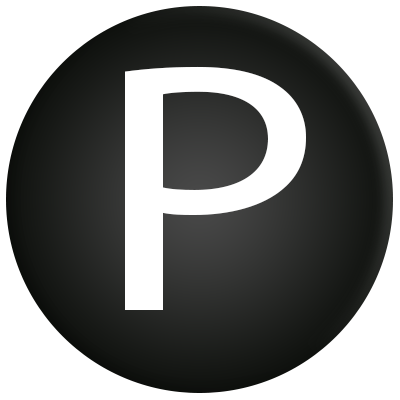
<style>
.page{position:relative;width:400px;height:400px;background:#ffffff}
.page>*{position:absolute;margin:0}
.t1{font:265.3px "MyriadPro-Regular";color:#ffffff;scale:1.22 1}
</style>
<div class="page">
<p class="t1" style="left:125px;top:66px;width:181px;height:244px">P</p>
</div>
